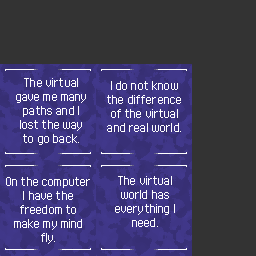
<style>
.page{position:relative;width:256px;height:256px;background:#333333}
.page>*{position:absolute;margin:0}
.t1{font:8px/14px "FFFExecutive";letter-spacing:0.02em;color:#ffffff}
</style>
<div class="page">
<p class="t1" style="left:16px;top:78px;width:70px;height:67px;text-align:center">The virtual gave me many paths and I lost the way to go back.</p>
<p class="t1" style="left:107px;top:81px;width:74px;height:51px;text-align:center">I do not know the difference of the virtual and real world.</p>
<p class="t1" style="left:6px;top:177px;width:84px;height:67px;text-align:center">On the computer I have the <br>freedom to make my mind fly.</p>
<p class="t1" style="left:115px;top:176px;width:60px;height:51px;text-align:center">The virtual world has everything I need.</p>
</div>
